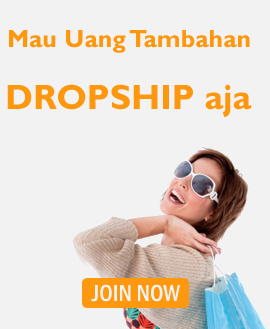
<style>
.page{position:relative;width:270px;height:329px;background:#f2f2f2}
.page>*{position:absolute;margin:0}
.t1{font:25px "GillSansMT-Bold";color:#fd970e}
.t2{font:35px "GillSansMT-Bold";color:#fd970e}
.t3{font:24px "FranklinGothic-MediumCond";color:#f2f2f2}
</style>
<div class="page">
<p class="t1" style="left:9px;top:30px;width:241px;height:23px">Mau Uang Tambahan</p>
<p class="t2" style="left:7px;top:84px;width:245px;height:33px">DROPSHIP aja</p>
<p class="t3" style="left:91px;top:284px;width:89px;height:18px">JOIN NOW</p>
</div>
